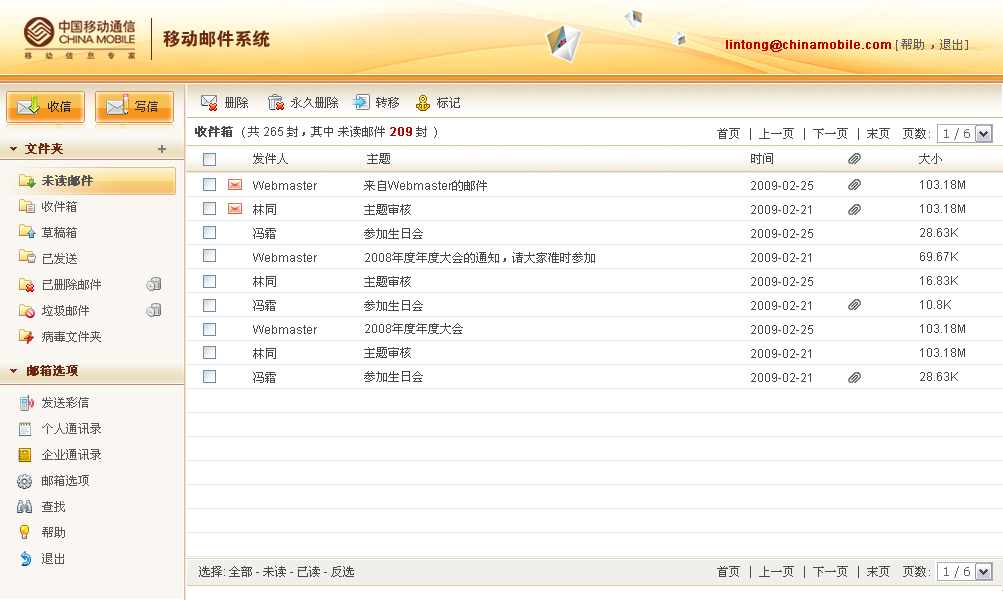
<style>
.page{position:relative;width:1003px;height:600px;background:#ffffff}
.page>*{position:absolute;margin:0}
.t1{font:18px "FZDHTJW--GB1-0";color:#6d290f}
.t2{font:12px "ArialMT";color:#b80000;font-weight:bold}
.t3{font:12px "ArialMT";color:#5e5e5e}
.t4{font:12px "SimSun";color:#5e5e5e}
.t5{font:12px "SimSun";color:#1e1e1e}
.t6{font:12px "SimSun";color:#313131}
.t7{font:12px "SimSun";color:#474747}
.t8{font:12px "SimSun";color:#474747;font-weight:bold}
.t9{font:12px "ArialMT";color:#474747}
.t10{font:12px "SimSun";color:#6d290f;font-weight:bold}
.t11{font:12px/26px "SimSun";color:#555555}
.t12{font:12px/26px "SimSun";color:#555555;font-weight:bold}
.t13{font:12px/24px "ArialMT";color:#474747}
.t14{font:12px/24px "SimSun";color:#474747}
.t15{font:12px/23.9px "SimSun";color:#474747}
.t16{font:12px/23.9px "ArialMT";color:#474747}
</style>
<div class="page">
<p class="t1" style="left:163px;top:30px;width:107px;height:17px">移动邮件系统</p>
<p class="t2" style="left:726px;top:39px;width:242px;height:13px">lintong@chinamobile.com <span class="t3">[ </span><span class="t4">帮助 ，退出]</span></p>
<p class="t5" style="left:48px;top:101px;width:23px;height:11px">收信</p>
<p class="t6" style="left:135px;top:101px;width:23px;height:11px">写信</p>
<p class="t7" style="left:225px;top:97px;width:23px;height:11px">删除</p>
<p class="t7" style="left:291px;top:97px;width:47px;height:11px">永久删除</p>
<p class="t7" style="left:376px;top:97px;width:23px;height:11px">转移</p>
<p class="t7" style="left:437px;top:97px;width:23px;height:11px">标记</p>
<p class="t7" style="left:195px;top:126px;width:242px;height:12px"><span class="t8">收件箱 </span><span class="t9">( </span>共<span class="t9"> 265 </span>封，其中 未读邮件 <span class="t2">209 </span>封 <span class="t9">)</span></p>
<p class="t10" style="left:25px;top:143px;width:38px;height:11px">文件夹</p>
<p class="t7" style="left:253px;top:153px;width:689px;height:11px">发件人             主题                                                            时间                        大小</p>
<p class="t11" style="left:42px;top:175px;width:59px;height:167px"><span class="t12">未读邮件<br></span>收件箱<br>草稿箱<br>已发送<br>已删除邮件      <br>垃圾邮件       <br>病毒文件夹</p>
<p class="t13" style="left:253px;top:181px;width:64px;height:202px">Webmaster　   　　<br><span class="t14">林同<br>冯霜</span><br>Webmaster　   　　<br><span class="t14">林同<br>冯霜</span><br>Webmaster　   　　<br><span class="t14">林同<br>冯霜</span></p>
<p class="t15" style="left:364px;top:180px;width:231px;height:202px">来自<span class="t16">Webmaster</span>的邮件<br>主题审核<br>参加生日会<span class="t16"><br>2008</span>年度年度大会的通知，请大家准时参加<br>主题审核<br>参加生日会<span class="t16"><br>2008</span>年度年度大会<br>主题审核<br>参加生日会</p>
<p class="t13" style="left:751px;top:181px;width:62px;height:201px">2009-02-25<br>2009-02-21<br>2009-02-25<br>2009-02-21<br>2009-02-25<br>2009-02-21<br>2009-02-25<br>2009-02-21<br>2009-02-21</p>
<p class="t13" style="left:920px;top:180px;width:45px;height:201px">103.18M<br>103.18M<br>28.63K<br>69.67K<br>16.83K<br>10.8K<br>103.18M<br>103.18M<br>28.63K</p>
<p class="t10" style="left:27px;top:365px;width:51px;height:11px">邮箱选项</p>
<p class="t11" style="left:42px;top:397px;width:59px;height:167px">发送彩信<br>个人通讯录<br>企业通讯录<br>邮箱选项<br>查找<br>帮助<br>退出</p>
<p class="t7" style="left:199px;top:566px;width:155px;height:11px">选择<span class="t9">: </span>全部<span class="t9"> - </span>未读<span class="t9"> - </span>已读<span class="t9"> - </span>反选</p>
</div>
